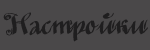
<style>
.page{position:relative;width:150px;height:50px;background:#4a4849}
.page>*{position:absolute;margin:0}
.t1{font:27.6px "MinusmanC";color:#000000}
</style>
<div class="page">
<p class="t1" style="left:3px;top:12px;width:145px;height:30px;opacity:0.66">Настройки</p>
</div>
